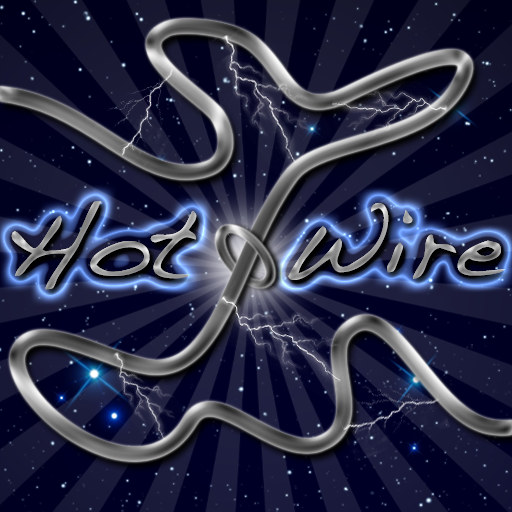
<style>
.page{position:relative;width:512px;height:512px}
.page>*{position:absolute;margin:0}
.t1{font:100px "Handwriting-Dakota"}
</style>
<div class="page">
<p class="t1" style="left:11px;top:201px;width:494px;height:89px">Hot  Wire</p>
<p class="t1" style="left:11px;top:201px;width:494px;height:89px">Hot  Wire</p>
</div>
